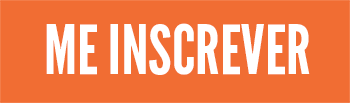
<style>
.page{position:relative;width:350px;height:103px;background:#f16d33}
.page>*{position:absolute;margin:0}
.t1{font:68px "LeagueGothic-Regular";color:#ffffff}
</style>
<div class="page">
<p class="t1" style="left:46px;top:23px;width:264px;height:52px">ME INSCREVER</p>
</div>
